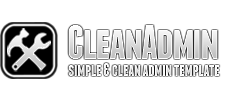
<style>
.page{position:relative;width:250px;height:100px;background:#ffffff}
.page>*{position:absolute;margin:0}
.t1{font:17.5px "Franchise-Bold";letter-spacing:-0.025em;color:#f8f8f8}
</style>
<div class="page">
<p class="t1" style="left:68px;top:63px;width:152px;height:13px">simple &amp; clean admin template</p>
</div>
